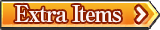
<style>
.page{position:relative;width:160px;height:30px}
.page>*{position:absolute;margin:0}
.t1{font:22px "RyuminPro-ExBold";letter-spacing:-0.08em;color:#fff6f3}
</style>
<div class="page">
<p class="t1" style="left:15px;top:5px;width:106px;height:18px">Extra Items</p>
</div>
